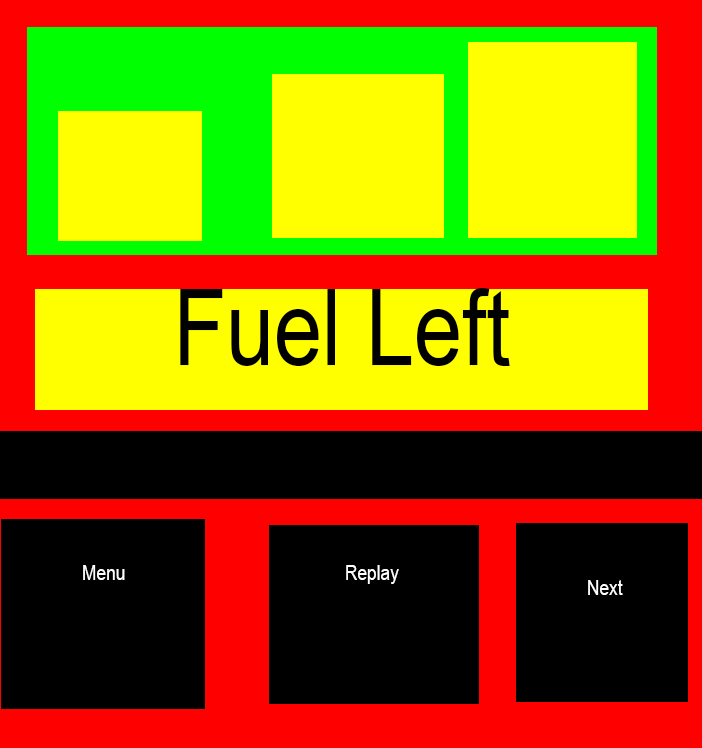
<style>
.page{position:relative;width:702px;height:748px;background:#000000}
.page>*{position:absolute;margin:0}
.t1{font:105.8px "ArialNarrow";color:#000000}
.t2{font:21.2px "ArialNarrow";color:#ffffff}
</style>
<div class="page">
<p class="t1" style="left:180px;top:288px;width:330px;height:78px">Fuel Left</p>
<p class="t2" style="left:83px;top:565px;width:42px;height:15px">Menu</p>
<p class="t2" style="left:346px;top:565px;width:53px;height:19px">Replay</p>
<p class="t2" style="left:588px;top:580px;width:35px;height:15px">Next</p>
</div>
